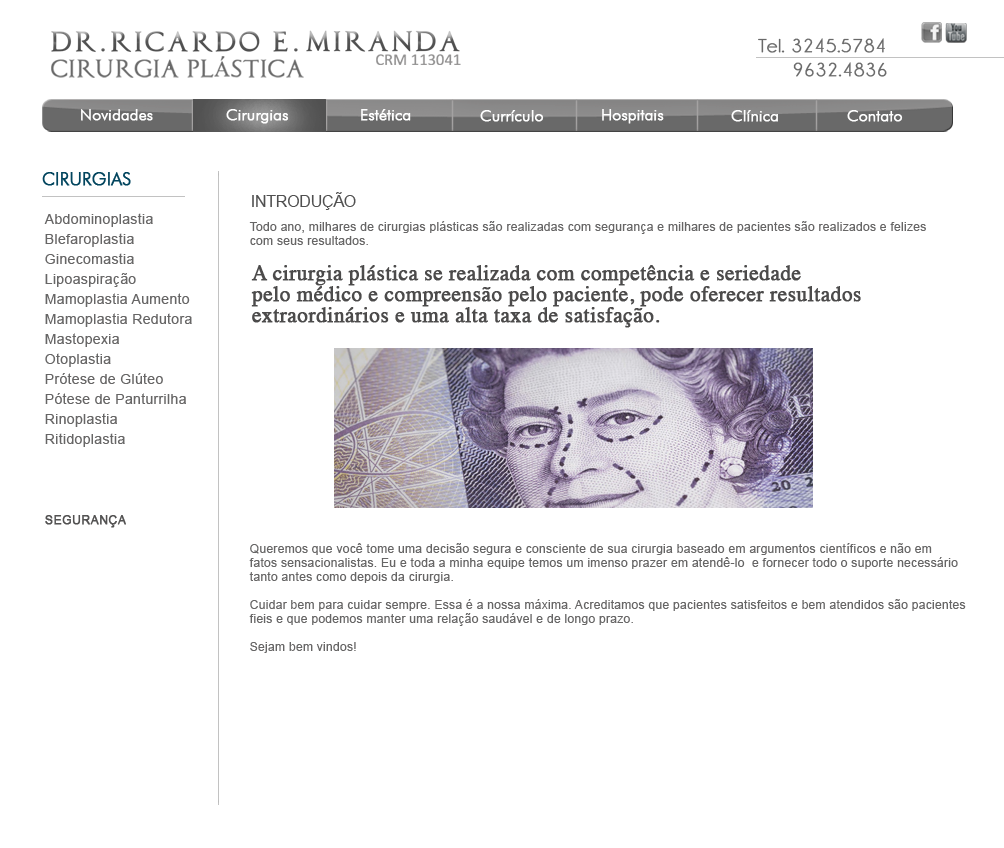
<style>
.page{position:relative;width:1004px;height:848px;background:#ffffff}
.page>*{position:absolute;margin:0}
.t1{font:19px/23.6px "Champagne&Limousines";letter-spacing:0.025em;color:#696969;font-weight:bold;scale:1.05 1}
.t2{font:16px "FuturaBT-Light";letter-spacing:-0.015em;color:#f8f8f8;font-weight:bold}
.t3{font:18px "FuturaBT-Light";letter-spacing:-0.015em;color:#02455e;font-weight:bold}
.t4{font:16px "ArialMT";letter-spacing:-0.015em;color:#505050}
.t5{font:14px/20px "ArialMT";letter-spacing:0.025em;color:#676666}
.t6{font:12px/20px "ArialMT";letter-spacing:0.025em;color:#535252;font-weight:bold}
.t7{font:12px/14px "ArialMT";letter-spacing:0.025em;color:#676666}
.t8{font:21px/21px "Times-Roman";letter-spacing:0.005em;color:#4c4b4b;font-weight:bold}
</style>
<div class="page">
<p class="t1" style="left:758px;top:38px;width:129px;height:39px;text-align:center">Tel. 3245.5784  <br>      9632.4836</p>
<p class="t2" style="left:81px;top:109px;width:72px;height:12px">Novidades</p>
<p class="t2" style="left:226px;top:109px;width:63px;height:15px">Cirurgias</p>
<p class="t2" style="left:361px;top:109px;width:50px;height:12px">Estética</p>
<p class="t2" style="left:480px;top:110px;width:64px;height:12px">Currículo</p>
<p class="t2" style="left:602px;top:109px;width:62px;height:15px">Hospitais</p>
<p class="t2" style="left:731px;top:110px;width:47px;height:12px">Clínica</p>
<p class="t2" style="left:847px;top:110px;width:56px;height:12px">Contato</p>
<p class="t3" style="left:42px;top:172px;width:89px;height:14px">CIRURGIAS</p>
<p class="t4" style="left:252px;top:192px;width:104px;height:18px">INTRODUÇÃO</p>
<p class="t5" style="left:44px;top:213px;width:148px;height:315px">Abdominoplastia<br>Blefaroplastia<br>Ginecomastia<br>Lipoaspiração<br>Mamoplastia Aumento<br>Mamoplastia Redutora<br>Mastopexia <br>Otoplastia<br>Prótese de Glúteo<br>Pótese de Panturrilha<br>Rinoplastia<br>Ritidoplastia<br><br><br><br><span class="t6">SEGURANÇA</span></p>
<p class="t7" style="left:249px;top:221px;width:677px;height:24px">Todo ano, milhares de cirurgias plásticas são realizadas com segurança e milhares de pacientes são realizados e felizes <br>com seus resultados.</p>
<p class="t8" style="left:251px;top:265px;width:610px;height:63px">A cirurgia plástica se realizada com competência e seriedade <br>pelo médico e compreensão pelo paciente, pode oferecer resultados <br>extraordinários e uma alta taxa de satisfação.</p>
<p class="t7" style="left:249px;top:543px;width:717px;height:110px">Queremos que você tome uma decisão segura e consciente de sua cirurgia baseado em argumentos científicos e não em <br>fatos sensacionalistas. Eu e toda a minha equipe temos um imenso prazer em atendê-lo  e fornecer todo o suporte necessário <br>tanto antes como depois da cirurgia.<br><br>Cuidar bem para cuidar sempre. Essa é a nossa máxima. Acreditamos que pacientes satisfeitos e bem atendidos são pacientes <br>fieis e que podemos manter uma relação saudável e de longo prazo.<br><br>Sejam bem vindos!</p>
</div>
